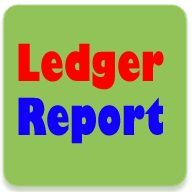
<style>
.page{position:relative;width:192px;height:192px;background:#91c359}
.page>*{position:absolute;margin:0}
.t1{font:50px/54px "GillSans-UltraBoldCondensed";color:#ff0000}
.t2{font:50px/54px "GillSans-UltraBoldCondensed";color:#1200ff}
</style>
<div class="page">
<p class="t1" style="left:18px;top:43px;width:146px;height:101px;text-align:center">Ledger<br><span class="t2">Report</span></p>
</div>
